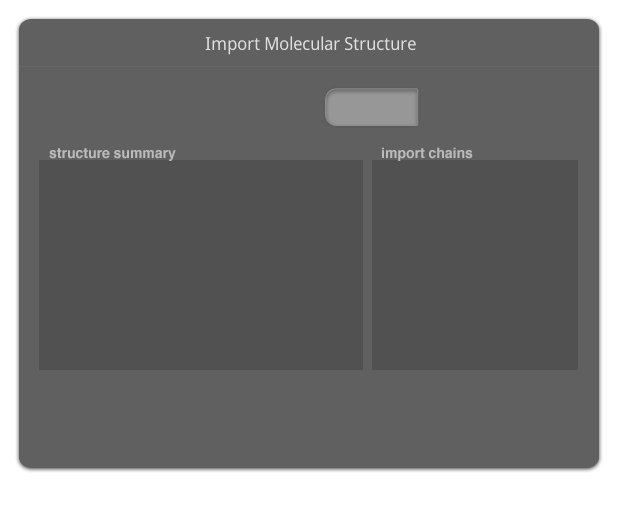
<style>
.page{position:relative;width:617px;height:512px;background:#606060}
.page>*{position:absolute;margin:0}
.t1{font:14px "Helvetica-Bold";color:#bbbbbb}
</style>
<div class="page">
<p class="t1" style="left:49px;top:148px;width:127px;height:13px">structure summary</p>
<p class="t1" style="left:382px;top:147px;width:91px;height:14px">import chains</p>
</div>
